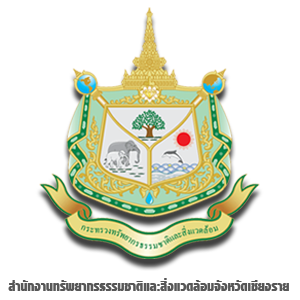
<style>
.page{position:relative;width:300px;height:300px;background:#ffffff}
.page>*{position:absolute;margin:0}
.t1{font:20px "PSLImperialExtra";letter-spacing:0.005em;color:#575757}
</style>
<div class="page">
<p class="t1" style="left:8px;top:278px;width:281px;height:13px">สำนักงานทรัพยากรธรรมชาติและสิ่งแวดล้อมจังหวัดเชียงราย</p>
</div>
